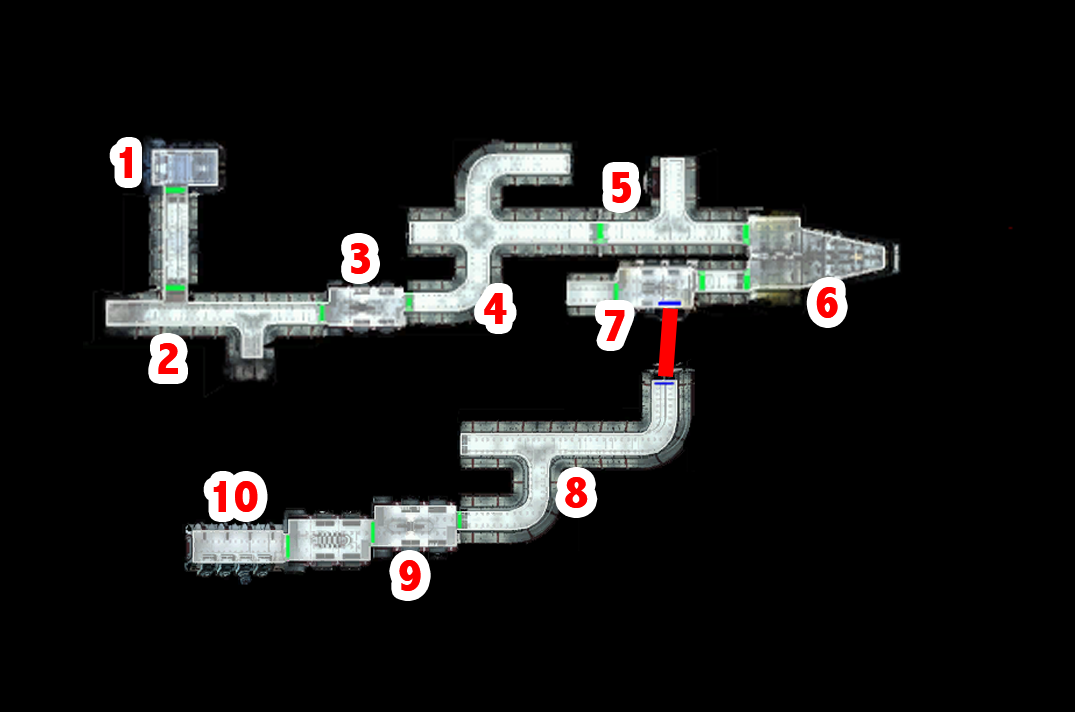
<style>
.page{position:relative;width:1075px;height:712px;background:#000000}
.page>*{position:absolute;margin:0}
.t1{font:48px "AbadiMT-CondensedExtraBold";color:#ff0000}
</style>
<div class="page">
<p class="t1" style="left:119px;top:147px;width:13px;height:31px">1</p>
<p class="t1" style="left:612px;top:172px;width:19px;height:31px">5</p>
<p class="t1" style="left:351px;top:243px;width:19px;height:31px">3</p>
<p class="t1" style="left:484px;top:293px;width:23px;height:31px">4</p>
<p class="t1" style="left:816px;top:287px;width:22px;height:31px">6</p>
<p class="t1" style="left:605px;top:310px;width:20px;height:31px">7</p>
<p class="t1" style="left:158px;top:343px;width:20px;height:31px">2</p>
<p class="t1" style="left:213px;top:481px;width:45px;height:31px">10</p>
<p class="t1" style="left:565px;top:477px;width:23px;height:31px">8</p>
<p class="t1" style="left:399px;top:560px;width:22px;height:31px">9</p>
</div>
